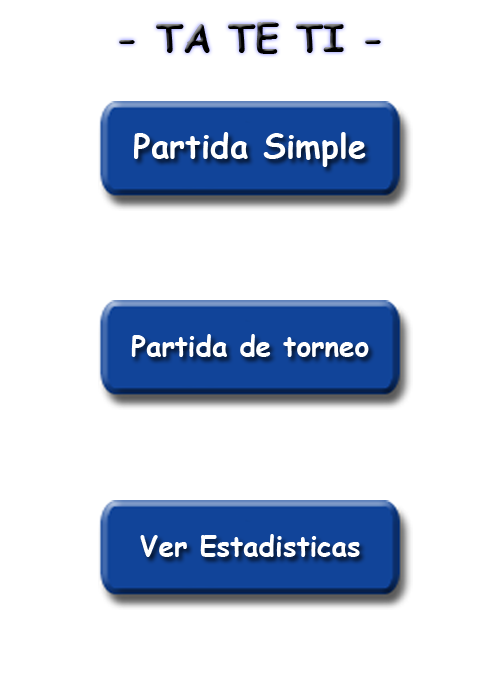
<style>
.page{position:relative;width:500px;height:700px;background:#ffffff}
.page>*{position:absolute;margin:0}
.t1{font:38.9px "ComicSansMS-Bold";color:#000000}
.t2{font:33.3px "ComicSansMS-Bold";color:#ffffff}
.t3{font:27.8px "ComicSansMS-Bold";color:#ffffff}
</style>
<div class="page">
<p class="t1" style="left:119px;top:22px;width:262px;height:32px">- TA TE TI -</p>
<p class="t2" style="left:134px;top:132px;width:232px;height:35px">Partida Simple</p>
<p class="t3" style="left:131px;top:334px;width:238px;height:23px">Partida de torneo</p>
<p class="t3" style="left:140px;top:534px;width:220px;height:23px">Ver Estadisticas</p>
</div>
